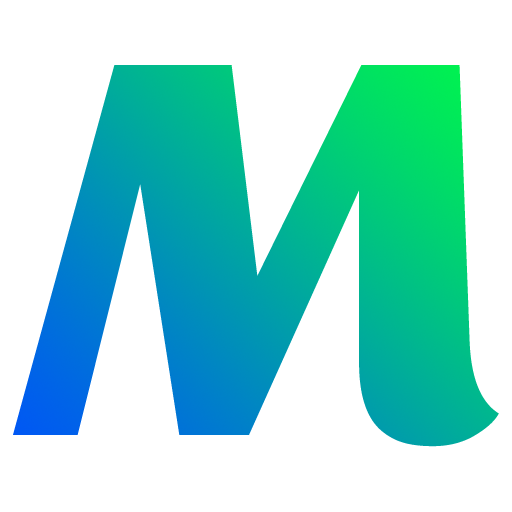
<style>
.page{position:relative;width:512px;height:512px;background:#ffffff}
.page>*{position:absolute;margin:0}
.t1{font:560px "SansitaOne"}
</style>
<div class="page">
<p class="t1" style="left:13px;top:65px;width:486px;height:382px">M</p>
</div>
